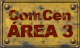
<style>
.page{position:relative;width:80px;height:48px}
.page>*{position:absolute;margin:0}
.t1{font:14px "Arial-Black";letter-spacing:-0.04em;font-weight:bold}
.t2{font:17px "Arial-Black";letter-spacing:-0.06em;color:#6a1505;font-weight:bold}
</style>
<div class="page">
<p class="t1" style="left:8px;top:9px;width:63px;height:12px">ComCen</p>
<p class="t2" style="left:7px;top:21px;width:66px;height:17px">ÁREA 3</p>
</div>
